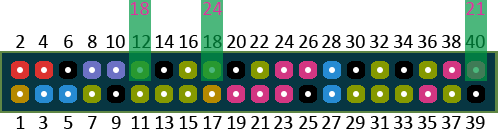
<style>
.page{position:relative;width:498px;height:130px;background:#ffffff}
.page>*{position:absolute;margin:0}
.t1{font:20px "Calibri";color:#d3369d}
.t2{font:20px "Calibri";color:#000000}
.t3{font:18px "Calibri";color:#000000}
.t4{font:20px "Calibri";color:#006b30}
.t5{font:18px "Calibri";color:#006b30}
</style>
<div class="page">
<p class="t1" style="left:130px;top:2px;width:19px;height:13px">18</p>
<p class="t1" style="left:203px;top:2px;width:20px;height:13px">24</p>
<p class="t1" style="left:466px;top:2px;width:19px;height:13px">21</p>
<p class="t2" style="left:16px;top:35px;width:9px;height:13px"><span class="t3"> </span>2</p>
<p class="t2" style="left:38px;top:35px;width:10px;height:13px"><span class="t3"> </span>4</p>
<p class="t2" style="left:64px;top:35px;width:9px;height:13px"><span class="t3"> </span>6</p>
<p class="t2" style="left:88px;top:35px;width:9px;height:13px"><span class="t3"> </span>8</p>
<p class="t2" style="left:106px;top:35px;width:19px;height:13px"><span class="t3"> </span>10</p>
<p class="t4" style="left:132px;top:35px;width:19px;height:13px"><span class="t5"> </span>12</p>
<p class="t2" style="left:155px;top:35px;width:19px;height:13px"><span class="t3"> </span>14</p>
<p class="t2" style="left:179px;top:35px;width:19px;height:13px"><span class="t3"> </span>16</p>
<p class="t4" style="left:203px;top:35px;width:19px;height:13px"><span class="t5"> </span>18</p>
<p class="t2" style="left:227px;top:35px;width:19px;height:13px"><span class="t3"> </span>20</p>
<p class="t2" style="left:250px;top:35px;width:19px;height:13px"><span class="t3"> </span>22</p>
<p class="t2" style="left:275px;top:35px;width:19px;height:13px"><span class="t3"> </span>24</p>
<p class="t2" style="left:299px;top:35px;width:19px;height:13px"><span class="t3"> </span>26</p>
<p class="t2" style="left:322px;top:35px;width:19px;height:13px"><span class="t3"> </span>28</p>
<p class="t2" style="left:346px;top:35px;width:19px;height:13px"><span class="t3"> </span>30</p>
<p class="t2" style="left:370px;top:35px;width:19px;height:13px"><span class="t3"> </span>32</p>
<p class="t2" style="left:394px;top:35px;width:19px;height:13px"><span class="t3"> </span>34</p>
<p class="t2" style="left:418px;top:35px;width:19px;height:13px"><span class="t3"> </span>36</p>
<p class="t2" style="left:442px;top:35px;width:19px;height:13px"><span class="t3"> </span>38</p>
<p class="t4" style="left:465px;top:35px;width:20px;height:13px"><span class="t5"> </span>40</p>
<p class="t2" style="left:16px;top:116px;width:9px;height:13px"><span class="t3"> </span>1</p>
<p class="t2" style="left:39px;top:116px;width:9px;height:13px"><span class="t3"> </span>3</p>
<p class="t2" style="left:64px;top:116px;width:9px;height:13px"><span class="t3"> </span>5</p>
<p class="t2" style="left:88px;top:116px;width:9px;height:13px"><span class="t3"> </span>7</p>
<p class="t2" style="left:111px;top:116px;width:10px;height:13px"><span class="t3"> </span>9</p>
<p class="t2" style="left:131px;top:116px;width:19px;height:13px"><span class="t3"> </span>11</p>
<p class="t2" style="left:155px;top:116px;width:19px;height:13px"><span class="t3"> </span>13</p>
<p class="t2" style="left:179px;top:116px;width:19px;height:13px"><span class="t3"> </span>15</p>
<p class="t2" style="left:203px;top:116px;width:19px;height:13px"><span class="t3"> </span>17</p>
<p class="t2" style="left:227px;top:116px;width:19px;height:13px"><span class="t3"> </span>19</p>
<p class="t2" style="left:251px;top:116px;width:19px;height:13px"><span class="t3"> </span>21</p>
<p class="t2" style="left:274px;top:116px;width:19px;height:13px"><span class="t3"> </span>23</p>
<p class="t2" style="left:299px;top:116px;width:19px;height:13px"><span class="t3"> </span>25</p>
<p class="t2" style="left:322px;top:116px;width:19px;height:13px"><span class="t3"> </span>27</p>
<p class="t2" style="left:346px;top:116px;width:19px;height:13px"><span class="t3"> </span>29</p>
<p class="t2" style="left:370px;top:116px;width:19px;height:13px">31</p>
<p class="t2" style="left:394px;top:116px;width:19px;height:13px"><span class="t3"> </span>33</p>
<p class="t2" style="left:418px;top:116px;width:19px;height:13px"><span class="t3"> </span>35</p>
<p class="t2" style="left:442px;top:116px;width:19px;height:13px"><span class="t3"> </span>37</p>
<p class="t2" style="left:466px;top:116px;width:19px;height:13px"><span class="t3"> </span>39</p>
</div>
